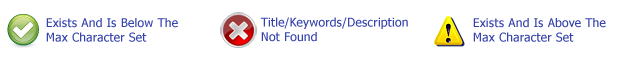
<style>
.page{position:relative;width:628px;height:64px;background:#ffffff}
.page>*{position:absolute;margin:0}
.t1{font:12px "Tahoma";letter-spacing:0.02em;color:#3643ab}
</style>
<div class="page">
<p class="t1" style="left:260px;top:17px;width:148px;height:25px">Title/Keywords/Description<br>Not Found</p>
<p class="t1" style="left:46px;top:18px;width:132px;height:24px">Exists And Is Below The<br>Max Character Set</p>
<p class="t1" style="left:473px;top:18px;width:133px;height:24px">Exists And Is Above The<br>Max Character Set</p>
</div>
